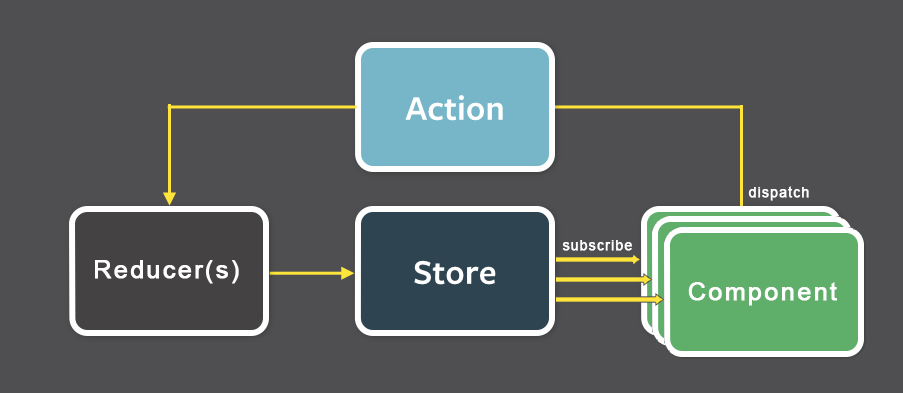
<style>
.page{position:relative;width:903px;height:393px;background:#4f4e50}
.page>*{position:absolute;margin:0}
.t1{font:14px "ArialMT";letter-spacing:0.06em;color:#ffffff;font-weight:bold}
.t2{font:25.5px "ArialMT";letter-spacing:0.06em;color:#ffffff;font-weight:bold}
</style>
<div class="page">
<p class="t1" style="left:748px;top:186px;width:61px;height:15px">dispatch</p>
<p class="t1" style="left:562px;top:240px;width:70px;height:11px">subscribe</p>
<p class="t2" style="left:95px;top:260px;width:144px;height:24px">Reducer(s)</p>
<p class="t2" style="left:688px;top:282px;width:149px;height:24px">Component</p>
</div>
